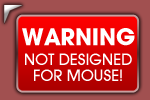
<style>
.page{position:relative;width:150px;height:100px;background:#a15050}
.page>*{position:absolute;margin:0}
.t1{font:25.1px "AvantGardeMdITCTTBold";color:#ffffff}
.t2{font:16.9px/16.2px "AvantGardeMdITCTT";color:#ffffff}
</style>
<div class="page">
<p class="t1" style="left:22px;top:28px;width:113px;height:18px">WARNING</p>
<p class="t2" style="left:25px;top:53px;width:107px;height:28px;text-align:center">NOT DESIGNED<br>FOR MOUSE!</p>
</div>
